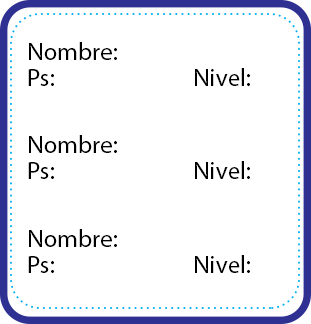
<style>
.page{position:relative;width:311px;height:324px;background:#ffffff}
.page>*{position:absolute;margin:0}
.t1{font:25px "MyriadPro-Regular";color:#000000}
</style>
<div class="page">
<p class="t1" style="left:29px;top:42px;width:88px;height:18px">Nombre:</p>
<p class="t1" style="left:28px;top:69px;width:26px;height:17px">Ps:</p>
<p class="t1" style="left:195px;top:68px;width:55px;height:18px">Nivel:</p>
<p class="t1" style="left:29px;top:135px;width:88px;height:18px">Nombre:</p>
<p class="t1" style="left:195px;top:161px;width:55px;height:18px">Nivel:</p>
<p class="t1" style="left:28px;top:162px;width:26px;height:17px">Ps:</p>
<p class="t1" style="left:29px;top:229px;width:88px;height:18px">Nombre:</p>
<p class="t1" style="left:28px;top:256px;width:26px;height:17px">Ps:</p>
<p class="t1" style="left:195px;top:255px;width:55px;height:18px">Nivel:</p>
</div>
